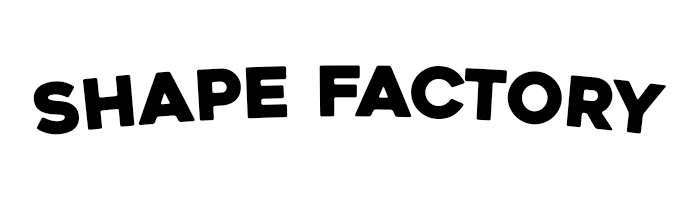
<style>
.page{position:relative;width:700px;height:200px;background:#ffffff}
.page>*{position:absolute;margin:0}
.t1{font:70px "Heavitas";color:#000000}
</style>
<div class="page">
<p class="t1" style="left:33px;top:65px;width:633px;height:70px">SHAPE  FACTORY</p>
</div>
